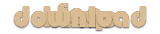
<style>
.page{position:relative;width:160px;height:34px;background:#ffffff}
.page>*{position:absolute;margin:0}
.t1{font:30px "BauhausITCbyBT-Heavy";color:#dabc93}
</style>
<div class="page">
<p class="t1" style="left:14px;top:6px;width:132px;height:21px">download</p>
<p class="t1" style="left:14px;top:6px;width:132px;height:21px">download</p>
<p class="t1" style="left:44px;top:6px;width:73px;height:21px">home</p>
<p class="t1" style="left:44px;top:6px;width:73px;height:21px">home</p>
<p class="t1" style="left:58px;top:3px;width:44px;height:27px">faq</p>
<p class="t1" style="left:58px;top:3px;width:44px;height:27px">faq</p>
</div>
